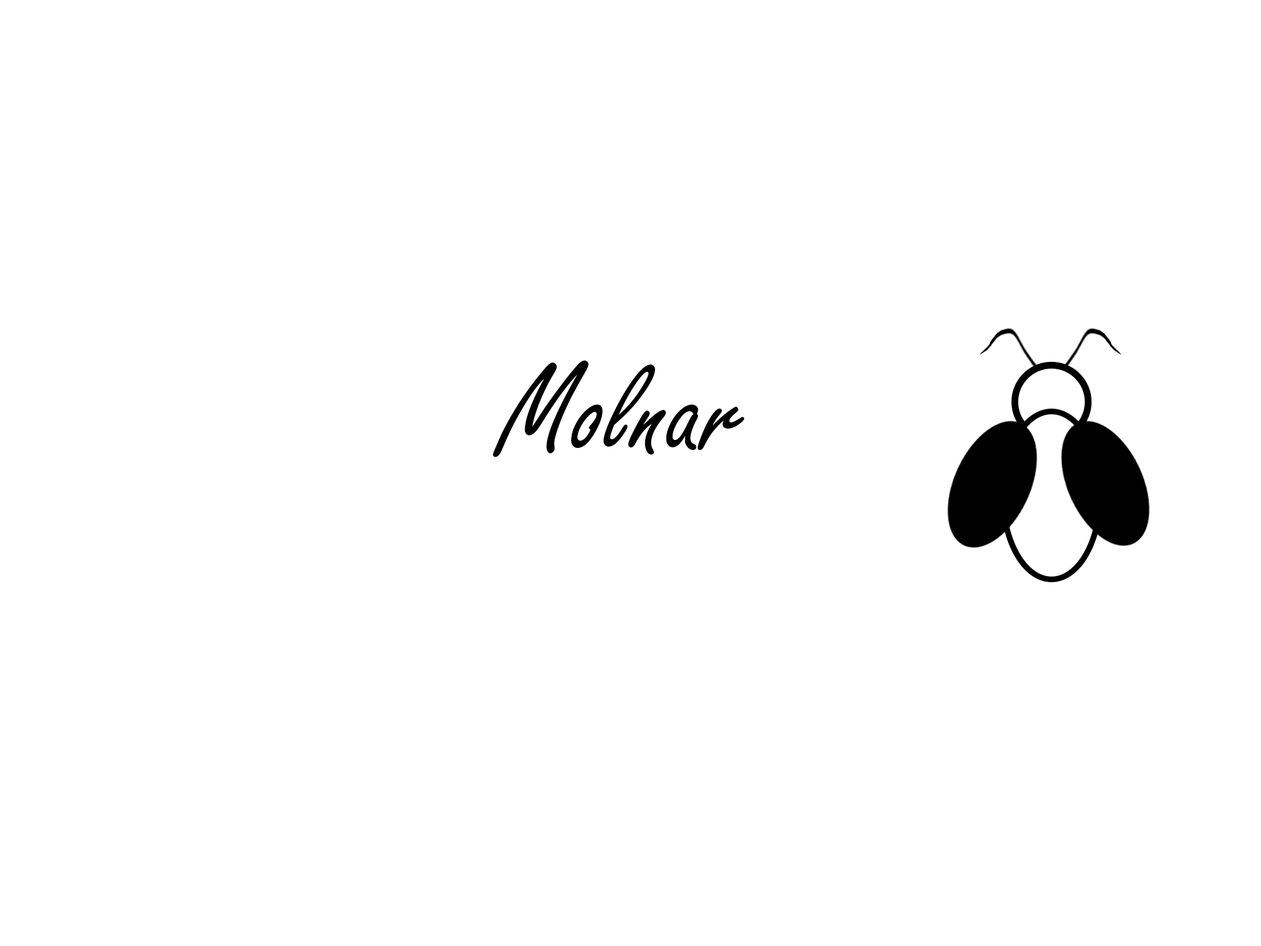
<style>
.page{position:relative;width:1261px;height:946px;background:#ffffff}
.page>*{position:absolute;margin:0}
.t1{font:133.5px "FreestyleScript-Regular";color:#000000}
</style>
<div class="page">
<p class="t1" style="left:492px;top:360px;width:253px;height:97px">Molnar</p>
</div>
